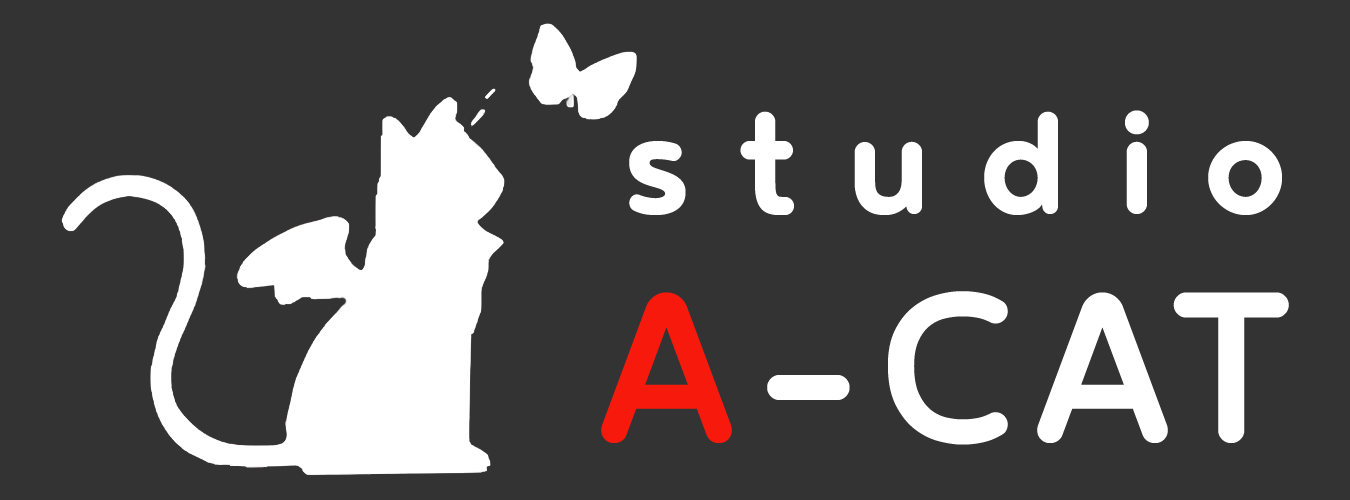
<style>
.page{position:relative;width:1350px;height:500px;background:#333333}
.page>*{position:absolute;margin:0}
.t1{font:180px "NoyhRBold";letter-spacing:0.24em;color:#ffffff}
.t2{font:255px "BetmRounded-Medium";letter-spacing:0.055em;color:#ffffff}
.t3{font:255px "BetmRounded-Medium";letter-spacing:0.055em;color:#f71a0c}
</style>
<div class="page">
<p class="t1" style="left:629px;top:110px;width:653px;height:105px">studio</p>
<p class="t2" style="left:601px;top:291px;width:688px;height:154px"><span class="t3">A</span>-CAT</p>
</div>
